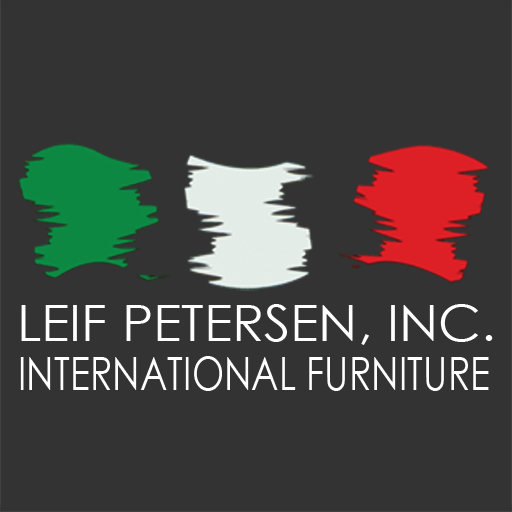
<style>
.page{position:relative;width:512px;height:512px;background:#333333}
.page>*{position:absolute;margin:0}
.t1{font:50px "CenturyGothic";color:#ffffff;scale:1.06 1}
.t2{font:45.7px "CenturyGothic";color:#ffffff;scale:0.82 1}
</style>
<div class="page">
<p class="t1" style="left:21px;top:304px;width:472px;height:41px">LEIF PETERSEN, INC.</p>
<p class="t2" style="left:20px;top:356px;width:469px;height:35px">INTERNATIONAL FURNITURE</p>
</div>
